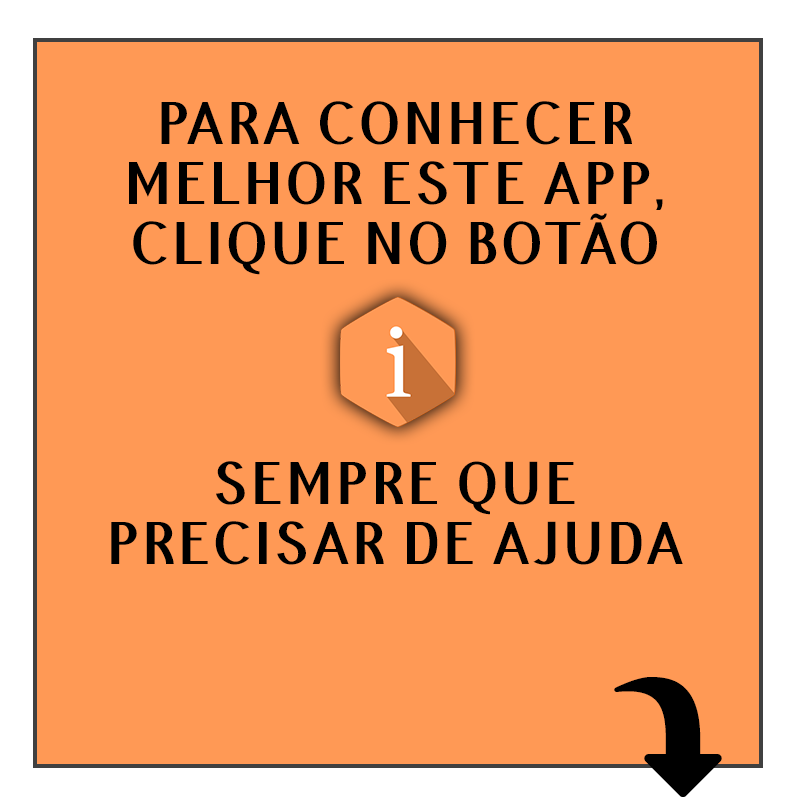
<style>
.page{position:relative;width:795px;height:806px;background:#ff9955}
.page>*{position:absolute;margin:0}
.t1{font:60px/60px "PfennigBold";letter-spacing:0.04em;color:#000000}
</style>
<div class="page">
<p class="t1" style="left:111px;top:101px;width:572px;height:464px;text-align:center">PARA CONHECER<br>MELHOR ESTE APP,<br>CLIQUE NO BOTÃO<br><br><br><br>SEMPRE QUE<br>PRECISAR DE AJUDA</p>
</div>
